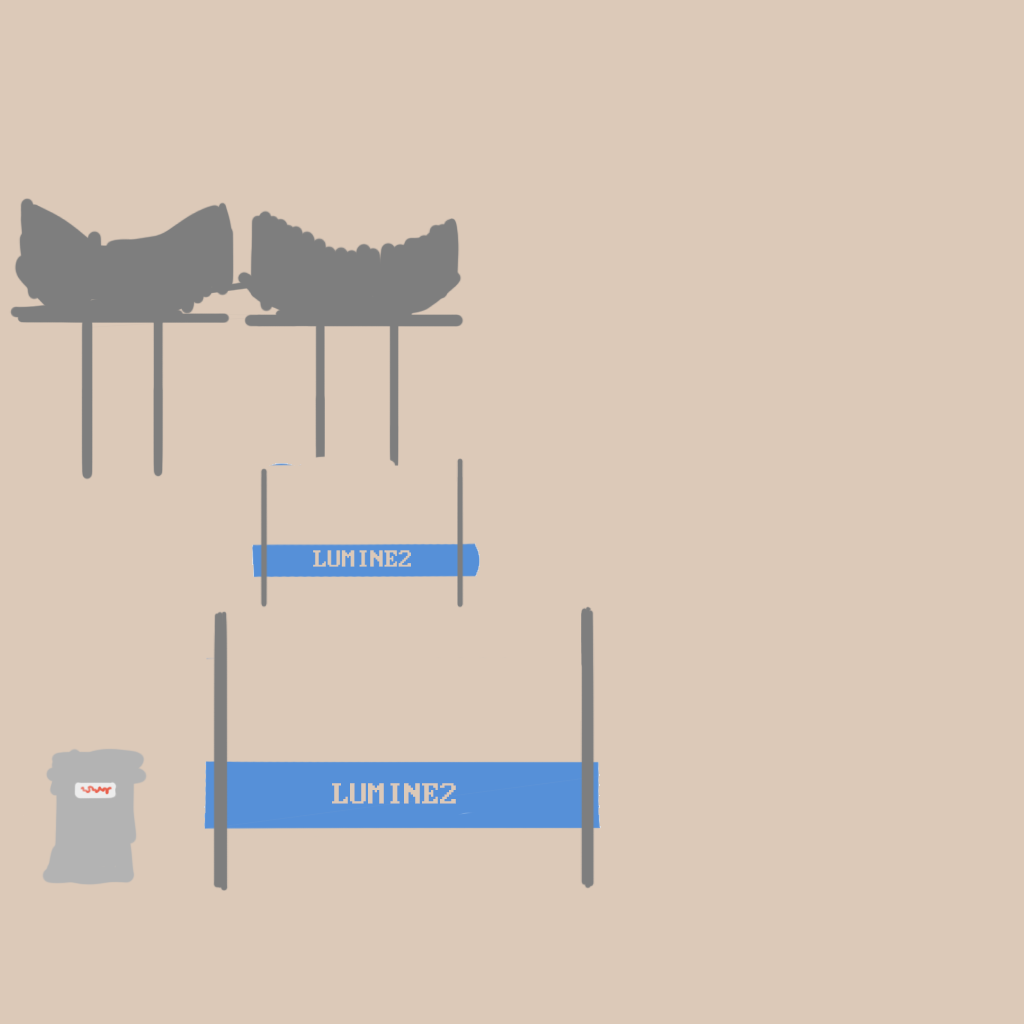
<style>
.page{position:relative;width:1024px;height:1024px;background:#dcc9b8}
.page>*{position:absolute;margin:0}
.t1{font:36px "DOSMyungjo";color:#dcc9b8}
</style>
<div class="page">
<p class="t1" style="left:332px;top:783px;width:124px;height:21px">LUMINE2</p>
</div>
